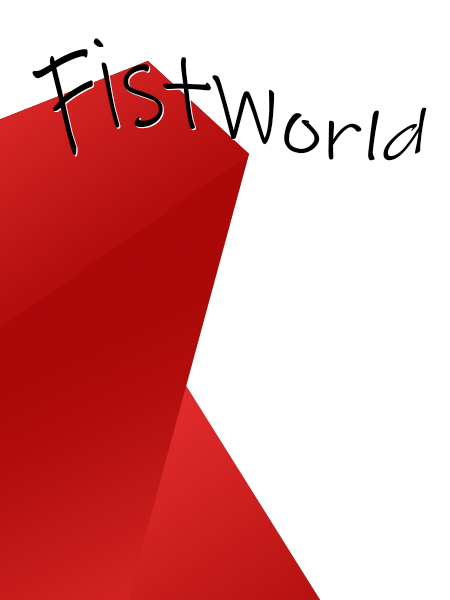
<style>
.page{position:relative;width:450px;height:600px;background:#ffffff}
.page>*{position:absolute;margin:0}
.t1{font:96px "InkFree";color:#000000}
</style>
<div class="page">
<p class="t1" style="left:32px;top:38px;width:395px;height:123px">FistWorld</p>
<p class="t1" style="left:33px;top:39px;width:395px;height:123px">FistWorld</p>
</div>
